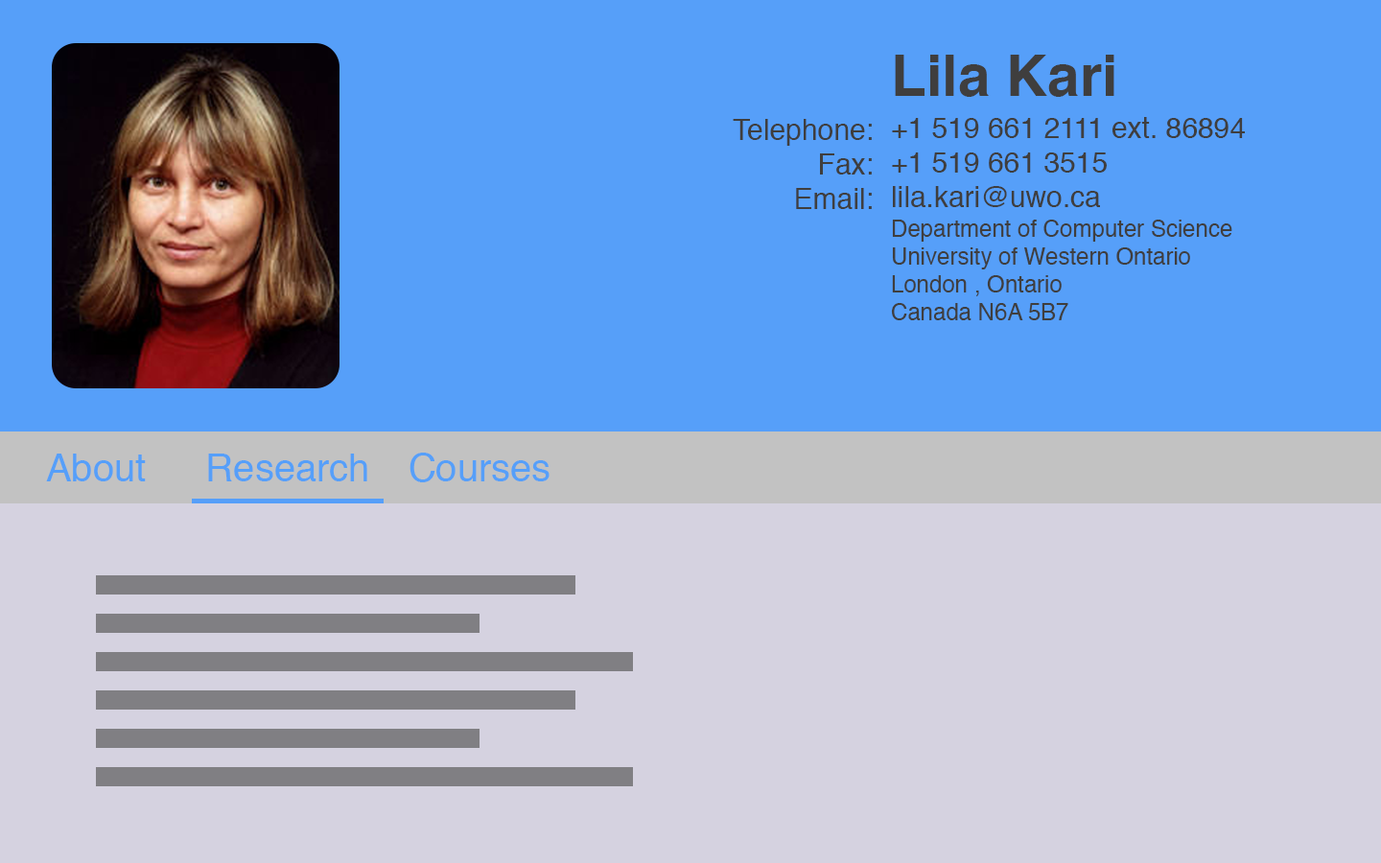
<style>
.page{position:relative;width:1381px;height:863px;background:#569ff9}
.page>*{position:absolute;margin:0}
.t1{font:57.6px "Helvetica-Bold";color:#3f3e3e}
.t2{font:28.8px "Helvetica";color:#3f3e3e}
.t3{font:23px "Helvetica";color:#3f3e3e}
.t4{font:38.4px "Helvetica";color:#569ff9}
</style>
<div class="page">
<p class="t1" style="left:895px;top:55px;width:220px;height:42px">Lila Kari</p>
<p class="t2" style="left:733px;top:119px;width:139px;height:90px;text-align:right">Telephone:<br>Fax:<br>Email:</p>
<p class="t2" style="left:892px;top:117px;width:353px;height:90px">+1 519 661 2111 ext. 86894 <br>+1 519 661 3515 <br>lila.kari@uwo.ca</p>
<p class="t3" style="left:891px;top:220px;width:342px;height:100px">Department of Computer Science <br>University of Western Ontario <br>London , Ontario <br>Canada N6A 5B7</p>
<p class="t4" style="left:46px;top:454px;width:100px;height:28px">About</p>
<p class="t4" style="left:46px;top:454px;width:100px;height:28px">About</p>
<p class="t4" style="left:208px;top:454px;width:159px;height:28px">Research</p>
<p class="t4" style="left:208px;top:454px;width:159px;height:28px">Research</p>
<p class="t4" style="left:410px;top:453px;width:140px;height:29px">Courses</p>
<p class="t4" style="left:410px;top:453px;width:140px;height:29px">Courses</p>
</div>
